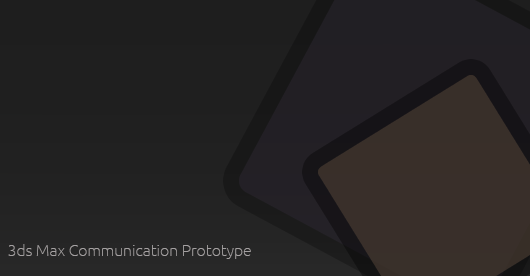
<style>
.page{position:relative;width:530px;height:276px}
.page>*{position:absolute;margin:0}
.t1{font:16px "Ubuntu-Thin";color:#a4a0a1}
</style>
<div class="page">
<p class="t1" style="left:8px;top:244px;width:243px;height:15px">3ds Max Communication Prototype</p>
</div>
